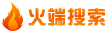
<style>
.page{position:relative;width:108px;height:35px;background:#ffffff}
.page>*{position:absolute;margin:0}
.t1{font:18px "SingYiEG-Ultra-GB";letter-spacing:0.1em;color:#f57200}
</style>
<div class="page">
<p class="t1" style="left:28px;top:8px;width:77px;height:18px">火端搜索</p>
</div>
